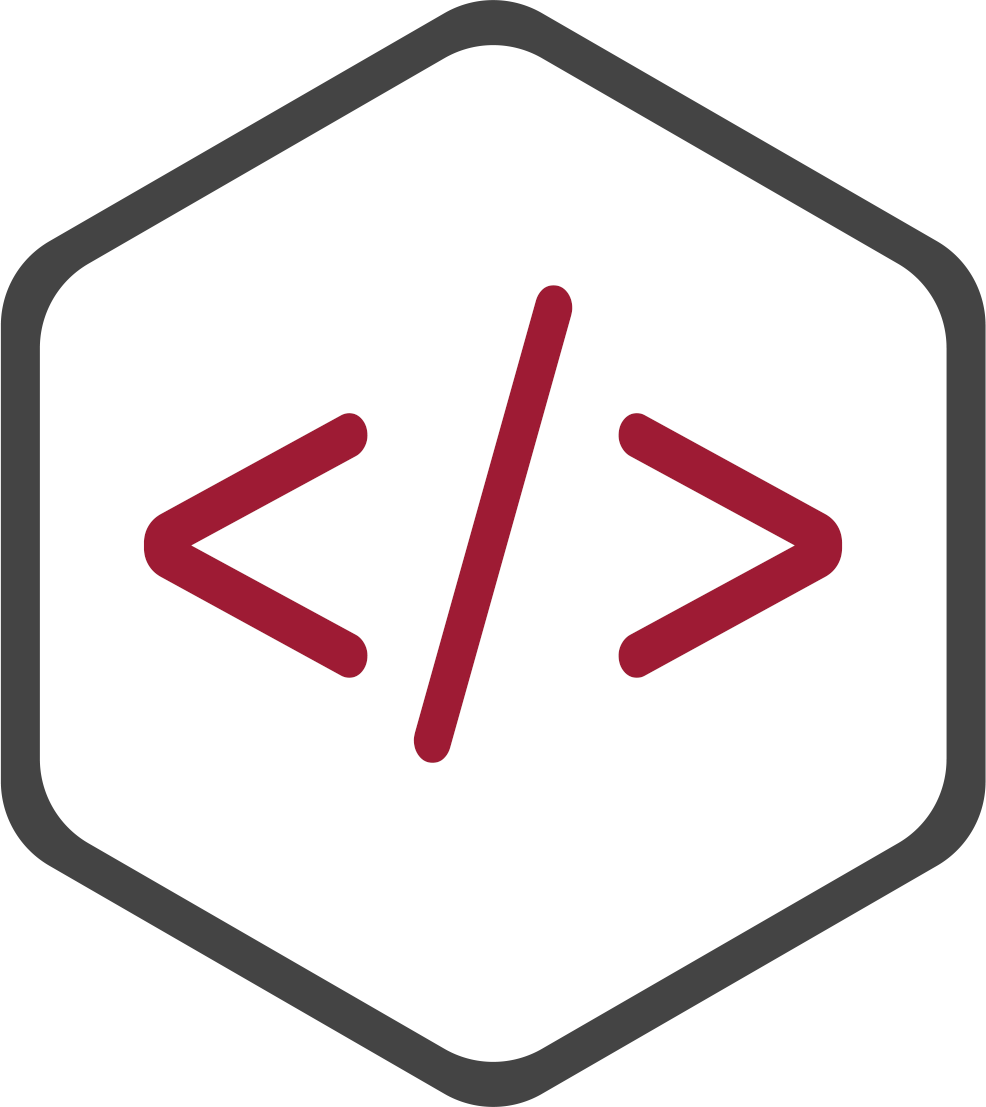
<style>
.page{position:relative;width:986px;height:1107px;background:#ffffff}
.page>*{position:absolute;margin:0}
.t1{font:555.9px "VarelaRound-Regular";color:#9e1b34;scale:0.82 1}
</style>
<div class="page">
<p class="t1" style="left:143px;top:285px;width:700px;height:478px">&lt;/&gt;</p>
</div>
